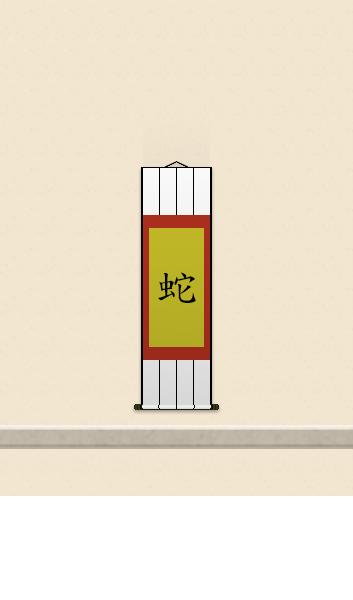
<style>
.page{position:relative;width:353px;height:600px;background:#f2e6d0}
.page>*{position:absolute;margin:0}
.t1{font:42px "DFKaiShu-SB-Estd-BF";color:#000000}
</style>
<div class="page">
<p class="t1" style="left:158px;top:272px;width:38px;height:31px">蛇</p>
</div>
